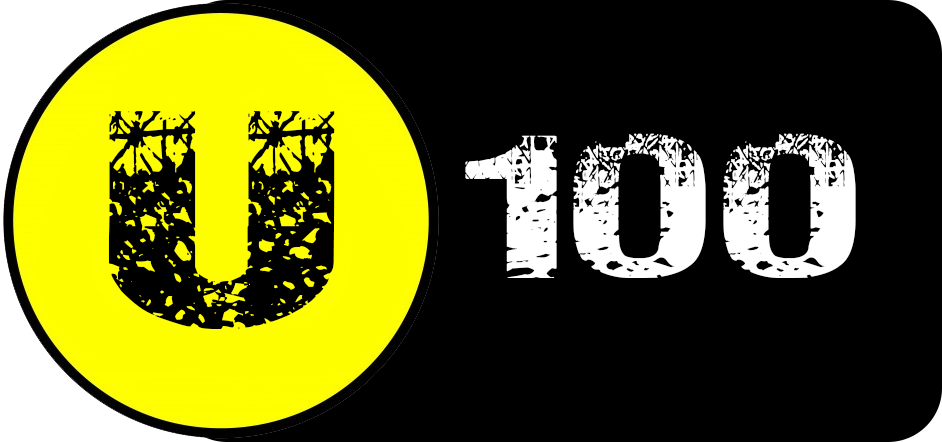
<style>
.page{position:relative;width:942px;height:442px;background:#000000}
.page>*{position:absolute;margin:0}
.t1{font:264.6px "NuclearAccident";color:#000000}
.t2{font:175px "NuclearAccident";color:#ffffff}
</style>
<div class="page">
<p class="t1" style="left:108px;top:111px;width:227px;height:218px">U</p>
<p class="t2" style="left:465px;top:133px;width:391px;height:145px">100</p>
</div>
